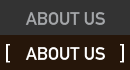
<style>
.page{position:relative;width:130px;height:70px;background:#333333}
.page>*{position:absolute;margin:0}
.t1{font:18px "DINMittelschriftStd";color:#a4a6a9}
.t2{font:22px "DINMittelschriftStd";color:#ffffff}
.t3{font:18px "DINMittelschriftStd";color:#ffffff}
</style>
<div class="page">
<p class="t1" style="left:25px;top:12px;width:80px;height:13px">ABOUT US</p>
<p class="t2" style="left:6px;top:44px;width:4px;height:19px">[</p>
<p class="t3" style="left:25px;top:47px;width:80px;height:13px">ABOUT US</p>
<p class="t2" style="left:120px;top:44px;width:4px;height:19px">]</p>
</div>
